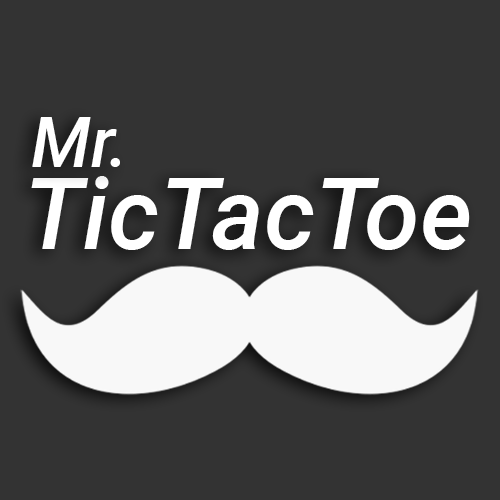
<style>
.page{position:relative;width:500px;height:500px;background:#333333}
.page>*{position:absolute;margin:0}
.t1{font:70px "Roboto-MediumItalic";color:#ffffff}
.t2{font:100px "Roboto-MediumItalic";color:#ffffff}
</style>
<div class="page">
<p class="t1" style="left:32px;top:117px;width:88px;height:50px">Mr.</p>
<p class="t2" style="left:31px;top:176px;width:439px;height:74px">TicTacToe</p>
</div>
